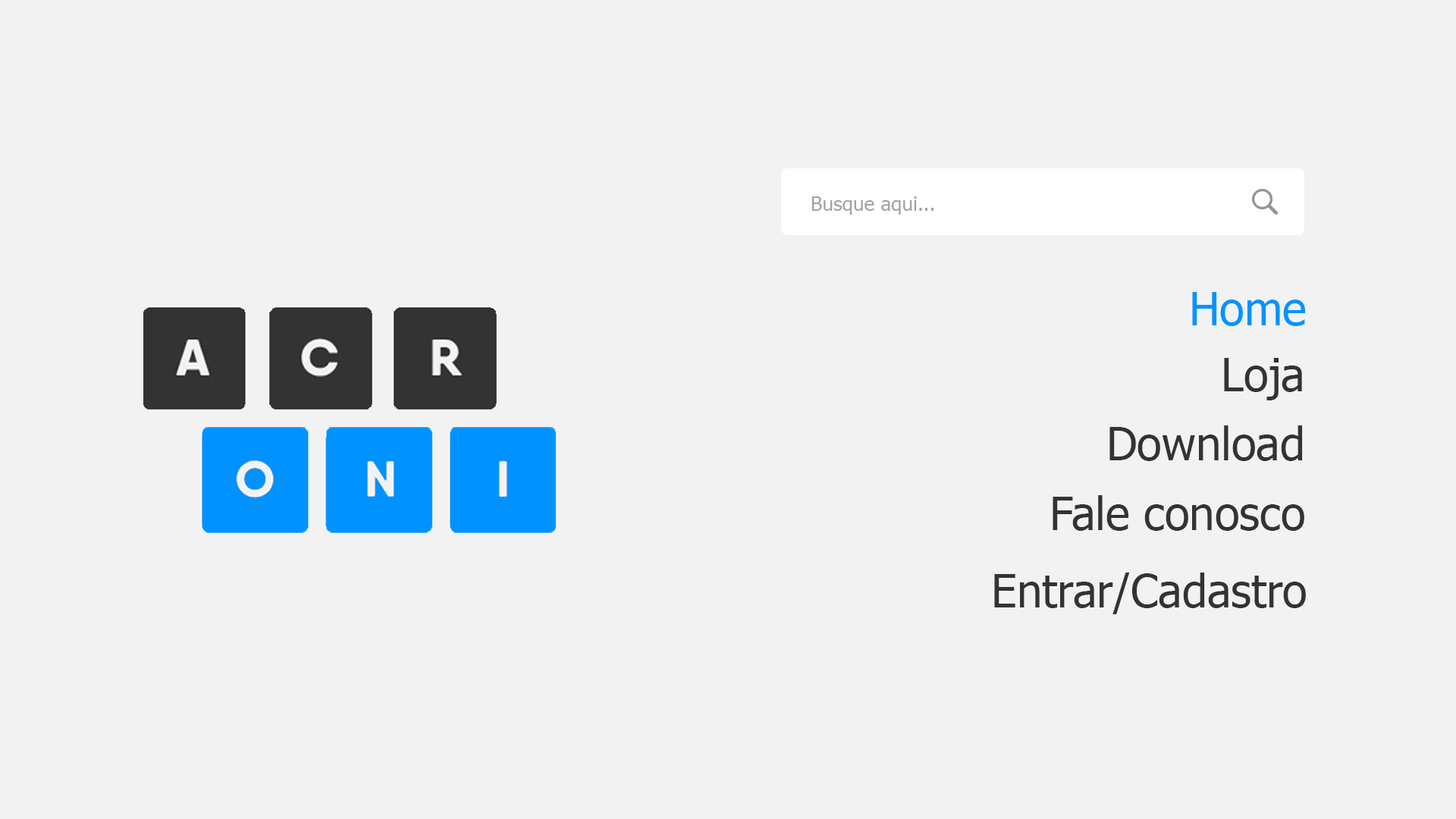
<style>
.page{position:relative;width:1456px;height:819px;background:#f2f2f2}
.page>*{position:absolute;margin:0}
.t1{font:45.5px "Tahoma";color:#0093ff}
.t2{font:45.5px "Tahoma";color:#333333}
</style>
<div class="page">
<p class="t1" style="left:1192px;top:292px;width:113px;height:34px">Home</p>
<p class="t2" style="left:1224px;top:358px;width:78px;height:42px">Loja</p>
<p class="t2" style="left:1109px;top:425px;width:194px;height:36px">Download</p>
<p class="t2" style="left:1053px;top:495px;width:251px;height:36px">Fale conosco</p>
<p class="t2" style="left:994px;top:573px;width:312px;height:41px">Entrar/Cadastro</p>
</div>
